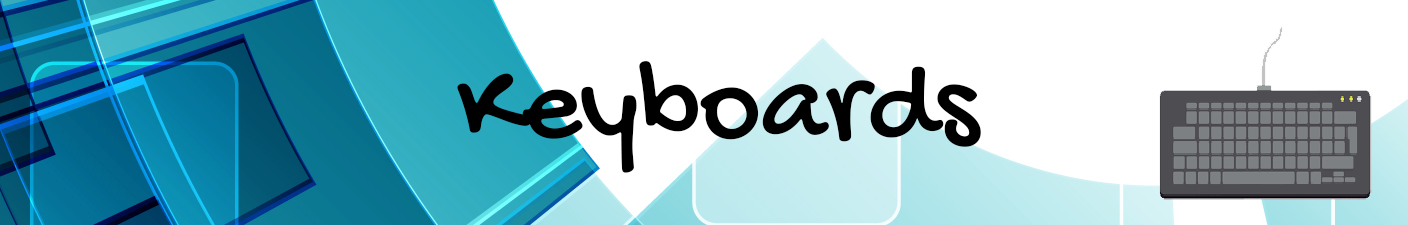
<style>
.page{position:relative;width:1408px;height:225px;background:#ffffff}
.page>*{position:absolute;margin:0}
.t1{font:116.7px "GochiHand-Regular";color:#000000}
</style>
<div class="page">
<p class="t1" style="left:457px;top:61px;width:524px;height:112px">Keyboards</p>
</div>
